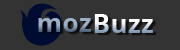
<style>
.page{position:relative;width:180px;height:50px;background:#333333}
.page>*{position:absolute;margin:0}
.t1{font:25.9px "OpenSans-Bold";letter-spacing:0.025em}
.t2{font:25.9px "OpenSans-Bold";letter-spacing:0.025em;color:#9ba4c7}
</style>
<div class="page">
<p class="t1" style="left:94px;top:14px;width:59px;height:19px">Buzz</p>
<p class="t2" style="left:38px;top:18px;width:53px;height:14px">moz</p>
</div>
